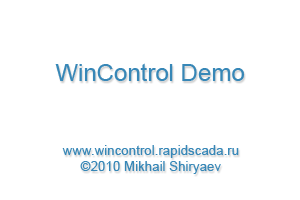
<style>
.page{position:relative;width:300px;height:200px;background:#ffffff}
.page>*{position:absolute;margin:0}
.t1{font:24px "ArialMT";color:#3787b7}
.t2{font:13.3px "ArialMT";color:#3787b7}
</style>
<div class="page">
<p class="t1" style="left:55px;top:63px;width:190px;height:18px">WinControl Demo</p>
<p class="t2" style="left:62px;top:145px;width:177px;height:29px;text-align:center">www.wincontrol.rapidscada.ru<br>©2010 Mikhail Shiryaev</p>
</div>
